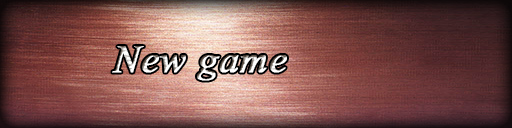
<style>
.page{position:relative;width:512px;height:128px}
.page>*{position:absolute;margin:0}
.t1{font:48px "Vijaya";letter-spacing:0.005em;font-weight:bold}
</style>
<div class="page">
<p class="t1" style="left:112px;top:46px;width:175px;height:35px">New game</p>
</div>
